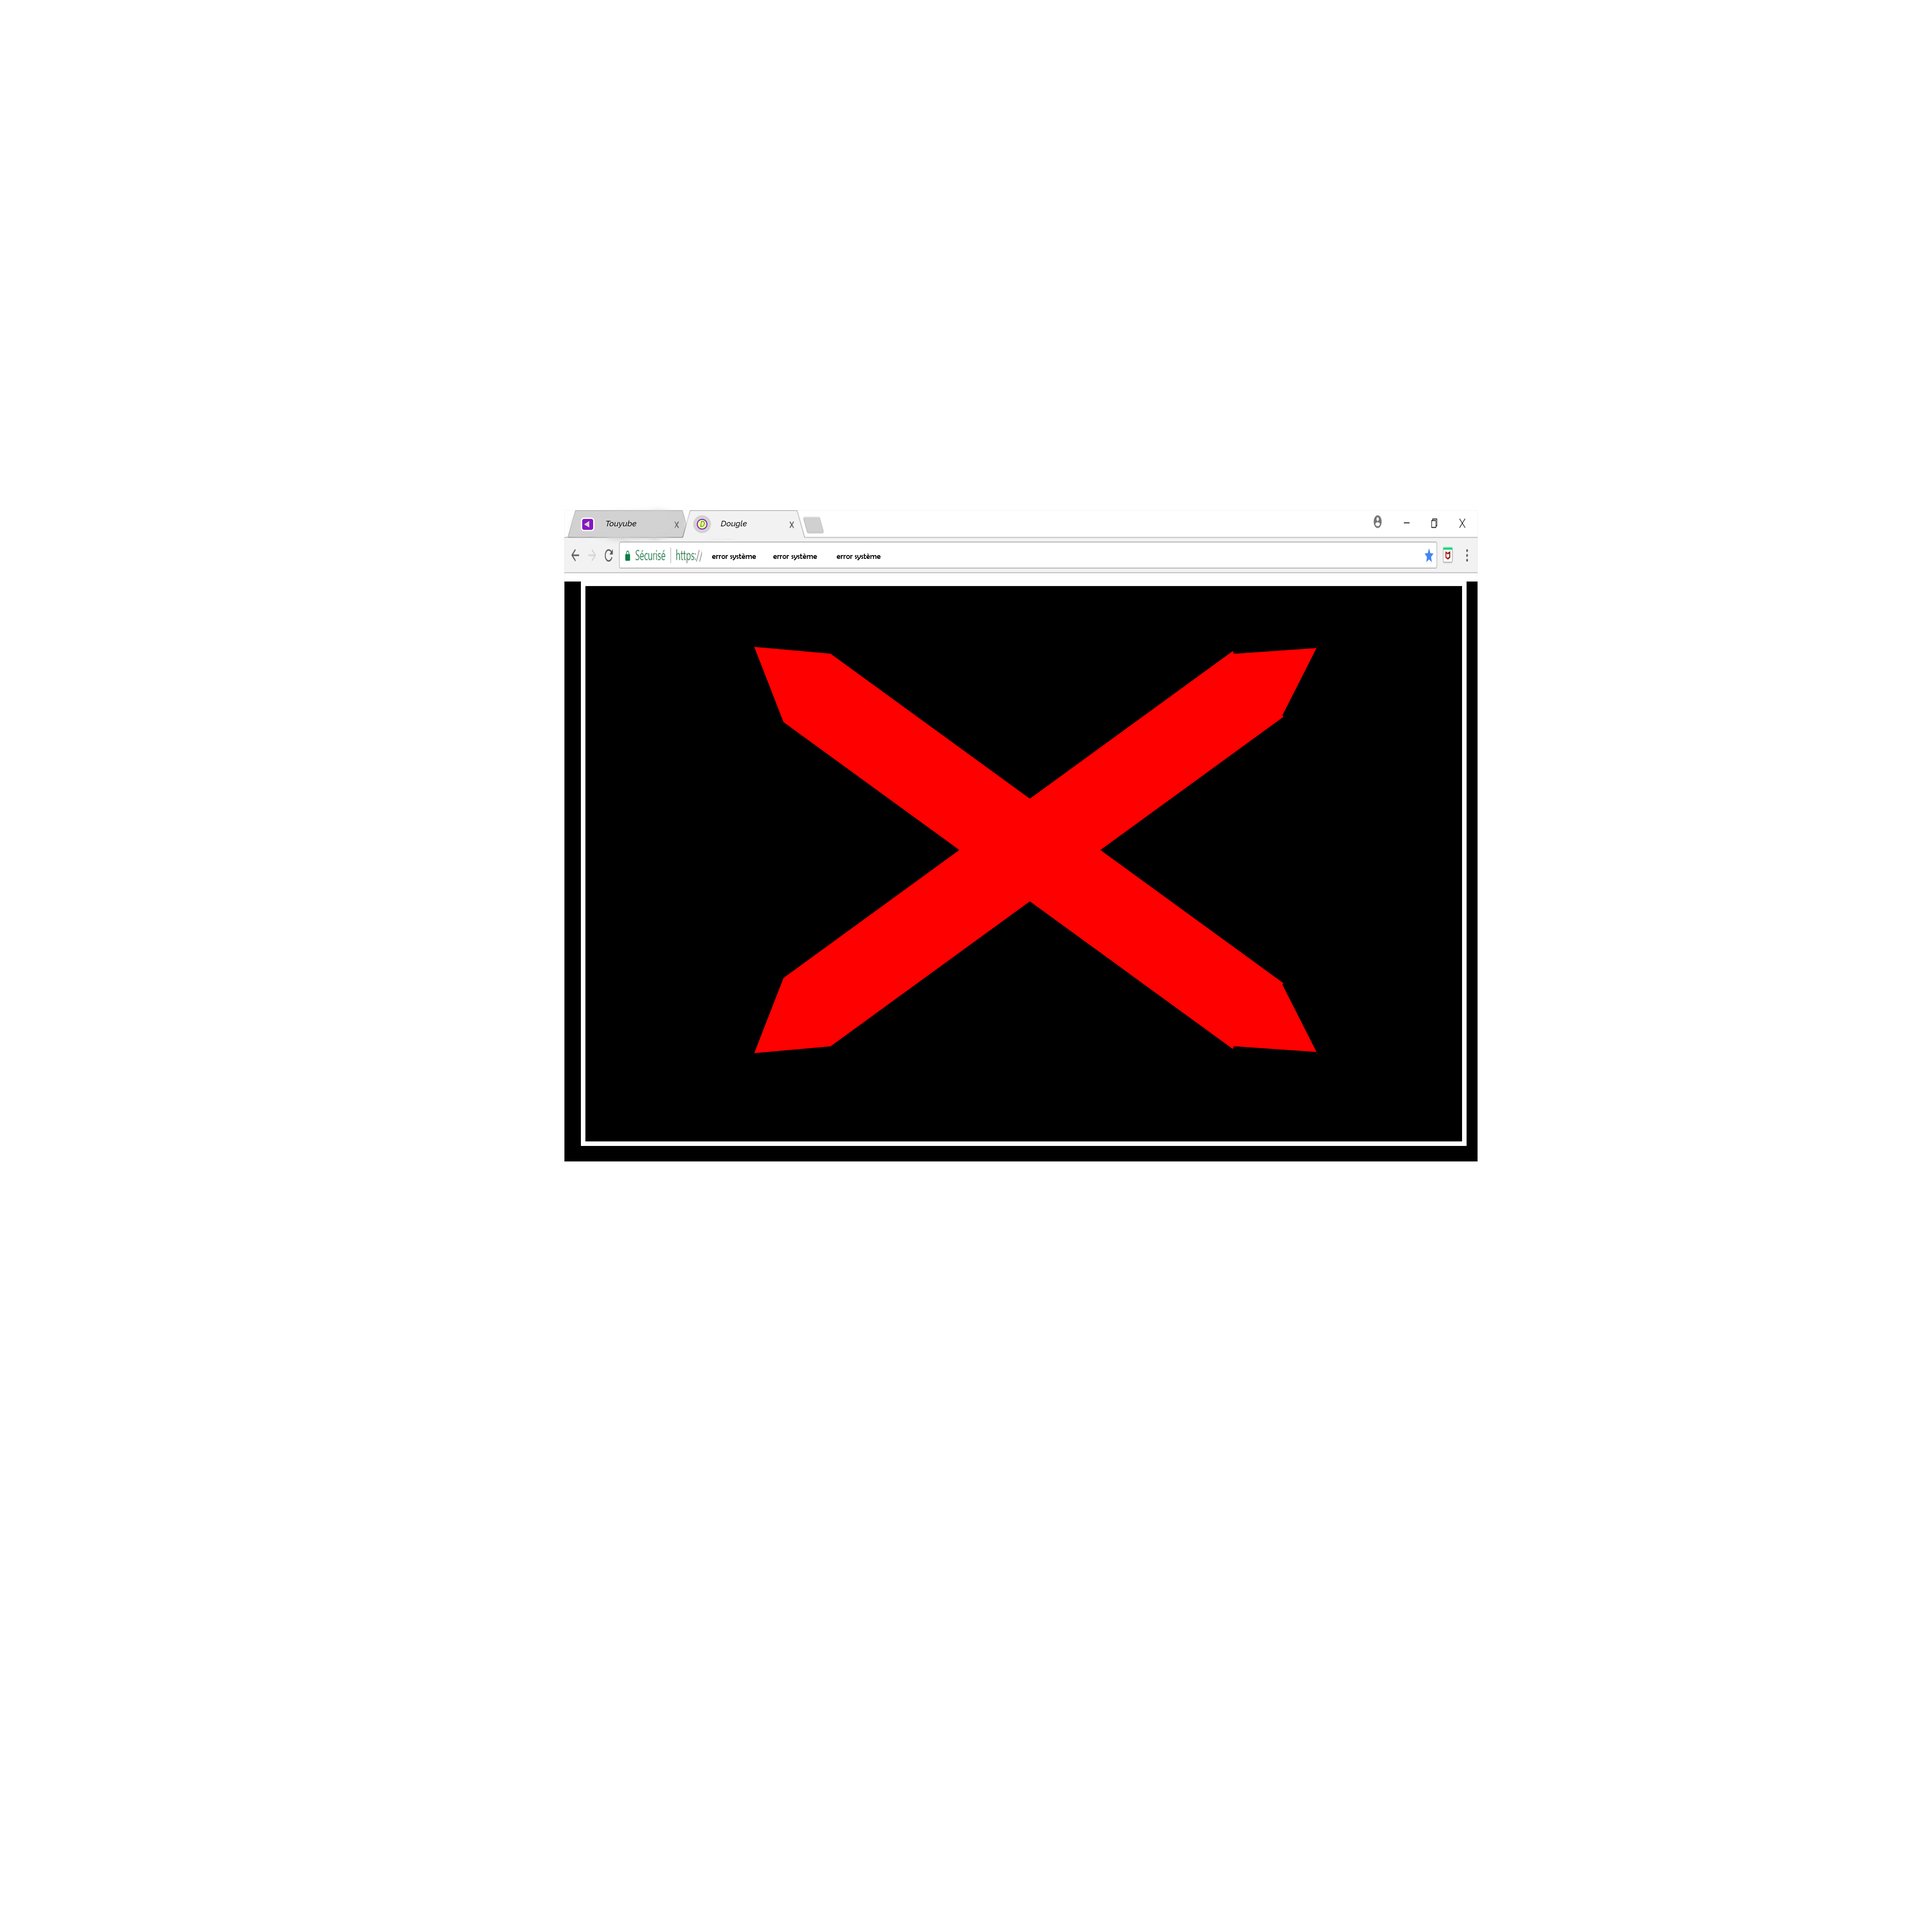
<style>
.page{position:relative;width:1907px;height:1907px;background:#ffffff}
.page>*{position:absolute;margin:0}
.t1{font:8.1px "Raleway-MediumItalic";color:#000000}
.t2{font:1.9px "Raleway-MediumItalic";color:#01a017;scale:0.86 1}
.t3{font:8.1px "BerlinSansFB-Reg";color:#000000}
</style>
<div class="page">
<p class="t1" style="left:606px;top:521px;width:31px;height:7px">Touyube</p>
<p class="t2" style="left:700px;top:521px;width:5px;height:6px">D</p>
<p class="t1" style="left:721px;top:521px;width:26px;height:7px">Dougle</p>
<p class="t3" style="left:712px;top:554px;width:44px;height:6px"><span class="t1"> </span>error système</p>
<p class="t3" style="left:773px;top:554px;width:44px;height:6px">error système</p>
<p class="t3" style="left:837px;top:554px;width:44px;height:6px"><span class="t1"> </span>error système</p>
</div>
